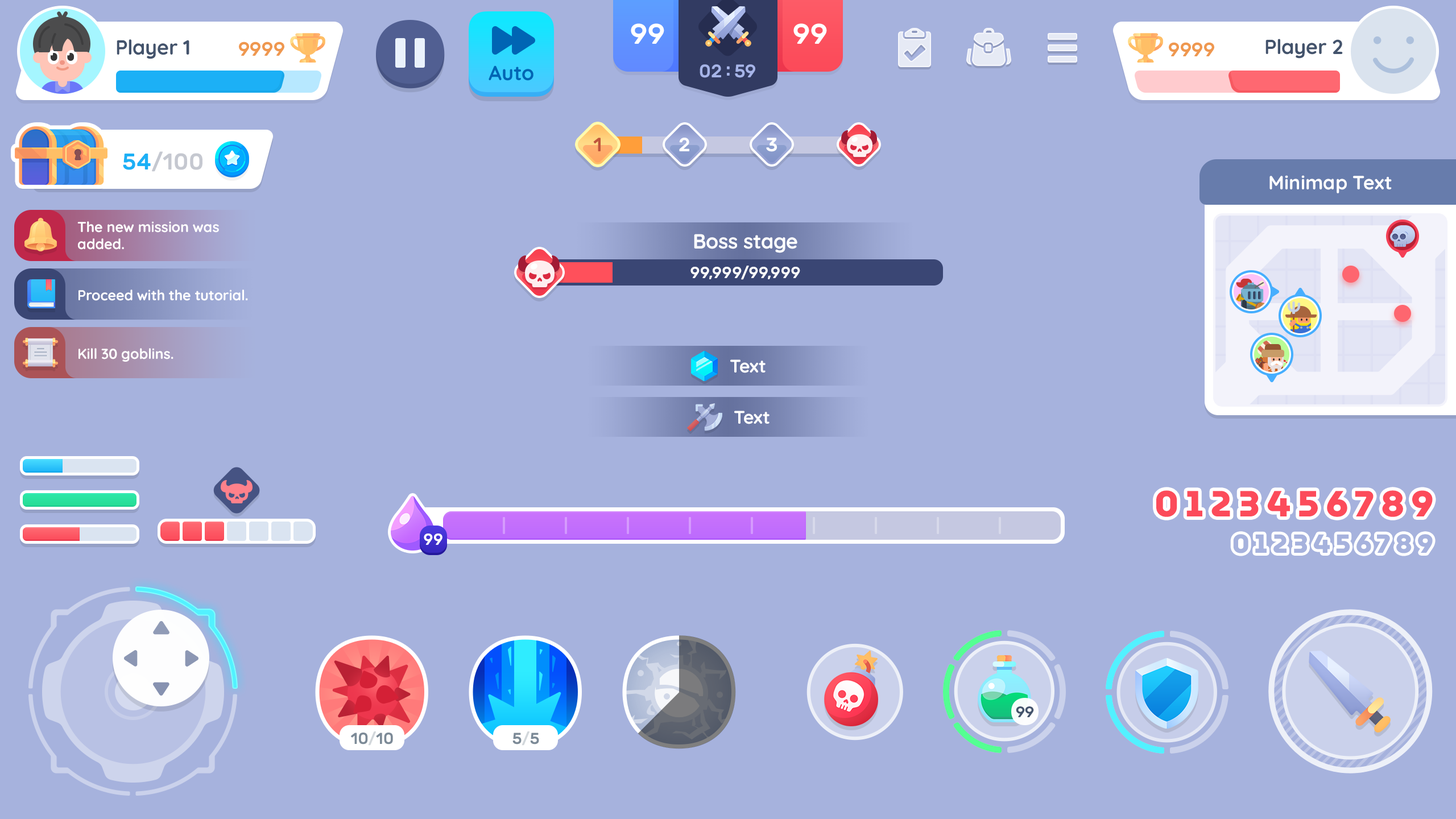
<style>
.page{position:relative;width:1456px;height:819px;background:#a6b2dd}
.page>*{position:absolute;margin:0}
.t1{font:28.4px "Rubik-Medium";letter-spacing:-0.01em;color:#ffffff}
.t2{font:20.5px "Quicksand-Bold";letter-spacing:-0.01em;color:#43536c}
.t3{font:19.3px "Rubik-Medium";letter-spacing:-0.01em;color:#ef984f}
.t4{font:20.4px "Quicksand-Bold";letter-spacing:-0.01em;color:#43536c}
.t5{font:20.5px "Quicksand-Bold";color:#0065b4}
.t6{font:18.2px "Rubik-Medium";letter-spacing:-0.01em;color:#a6b4e8}
.t7{font:19.3px "Rubik-Medium";letter-spacing:-0.025em;color:#c0553c}
.t8{font:19.3px "Rubik-Medium";letter-spacing:-0.025em;color:#ffffff}
.t9{font:22.7px "Rubik-Medium";color:#c5c8d0}
.t10{font:22.7px "Rubik-Medium";color:#1cb0f6}
.t11{font:19.3px "Quicksand-Bold";color:#ffffff}
.t12{font:14.3px/17.4px "Quicksand-Bold";letter-spacing:-0.01em;color:#ffffff}
.t13{font:20.5px "Quicksand-Bold";letter-spacing:-0.01em;color:#ffffff}
.t14{font:15.9px "Rubik-Medium";color:#ffffff}
.t15{font:14.3px "Quicksand-Bold";letter-spacing:-0.01em;color:#ffffff}
.t16{font:18.2px "Quicksand-Bold";letter-spacing:-0.01em;color:#ffffff}
.t17{font:36.4px "MuseoModerno-ExtraBold";letter-spacing:0.2em;color:#fc4b5a}
.t18{font:26.2px "MuseoModerno-ExtraBold";letter-spacing:0.2em;color:#a6b2dd}
.t19{font:15.2px "Rubik-Medium";letter-spacing:-0.01em;color:#43536c;text-transform:uppercase}
.t20{font:15.9px "Rubik-Medium";color:#7c8a97;text-transform:uppercase}
.t21{font:15.9px "Rubik-Medium";color:#d2d7db;text-transform:uppercase}
</style>
<div class="page">
<p class="t1" style="left:631px;top:23px;width:33px;height:21px">99</p>
<p class="t1" style="left:793px;top:23px;width:34px;height:21px">99</p>
<p class="t2" style="left:117px;top:39px;width:72px;height:20px">Player 1</p>
<p class="t3" style="left:239px;top:42px;width:45px;height:14px">9999</p>
<p class="t4" style="left:1265px;top:39px;width:78px;height:20px">Player 2</p>
<p class="t3" style="left:1169px;top:42px;width:45px;height:14px">9999</p>
<p class="t5" style="left:489px;top:65px;width:44px;height:16px">Auto</p>
<p class="t6" style="left:700px;top:64px;width:55px;height:14px">02 : 59</p>
<p class="t7" style="left:593px;top:138px;width:8px;height:13px">1</p>
<p class="t8" style="left:679px;top:138px;width:10px;height:13px">2</p>
<p class="t8" style="left:766px;top:138px;width:11px;height:14px">3</p>
<p class="t9" style="left:123px;top:151px;width:79px;height:21px"><span class="t10">54</span>/100</p>
<p class="t11" style="left:1269px;top:175px;width:123px;height:18px">Minimap Text</p>
<p class="t12" style="left:77px;top:221px;width:142px;height:29px">The new mission was <br>added.</p>
<p class="t13" style="left:694px;top:234px;width:103px;height:19px">Boss stage</p>
<p class="t14" style="left:690px;top:266px;width:110px;height:14px">99,999/99,999</p>
<p class="t15" style="left:78px;top:289px;width:170px;height:12px">Proceed with the tutorial.</p>
<p class="t15" style="left:78px;top:348px;width:95px;height:14px">Kill 30 goblins.</p>
<p class="t16" style="left:730px;top:359px;width:36px;height:14px">Text</p>
<p class="t16" style="left:734px;top:411px;width:36px;height:13px">Text</p>
<p class="t17" style="left:1156px;top:490px;width:277px;height:27px">0123456789</p>
<p class="t14" style="left:424px;top:533px;width:18px;height:12px">99</p>
<p class="t18" style="left:1233px;top:534px;width:200px;height:19px">0123456789</p>
<p class="t19" style="left:1016px;top:706px;width:18px;height:11px">99</p>
<p class="t20" style="left:351px;top:731px;width:42px;height:15px">10<span class="t21">/</span>10</p>
<p class="t20" style="left:512px;top:731px;width:27px;height:15px">5<span class="t21">/</span>5</p>
</div>
